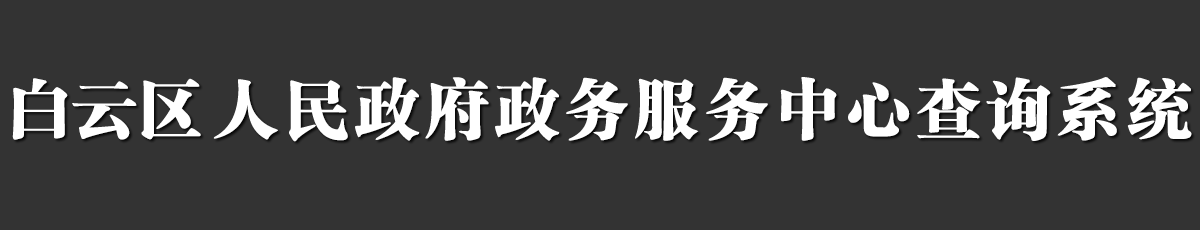
<style>
.page{position:relative;width:1200px;height:230px;background:#333333}
.page>*{position:absolute;margin:0}
.t1{font:64.8px "Jcusong";letter-spacing:0.015em;color:#ffffff}
</style>
<div class="page">
<p class="t1" style="left:12px;top:78px;width:189px;height:62px">白云区</p>
<p class="t1" style="left:355px;top:77px;width:65px;height:64px">政</p>
<p class="t1" style="left:425px;top:77px;width:64px;height:64px">府</p>
<p class="t1" style="left:495px;top:77px;width:65px;height:64px">政</p>
<p class="t1" style="left:566px;top:77px;width:62px;height:64px">务</p>
<p class="t1" style="left:635px;top:78px;width:64px;height:63px">服</p>
<p class="t1" style="left:706px;top:77px;width:62px;height:64px">务</p>
<p class="t1" style="left:780px;top:77px;width:57px;height:64px">中</p>
<p class="t1" style="left:917px;top:78px;width:64px;height:61px">查</p>
<p class="t1" style="left:986px;top:77px;width:65px;height:64px">询</p>
<p class="t1" style="left:1057px;top:77px;width:60px;height:64px">系</p>
<p class="t1" style="left:1127px;top:77px;width:65px;height:63px">统</p>
<p class="t1" style="left:213px;top:79px;width:65px;height:61px">人</p>
<p class="t1" style="left:289px;top:80px;width:59px;height:62px">民</p>
<p class="t1" style="left:848px;top:82px;width:62px;height:55px">心</p>
</div>
